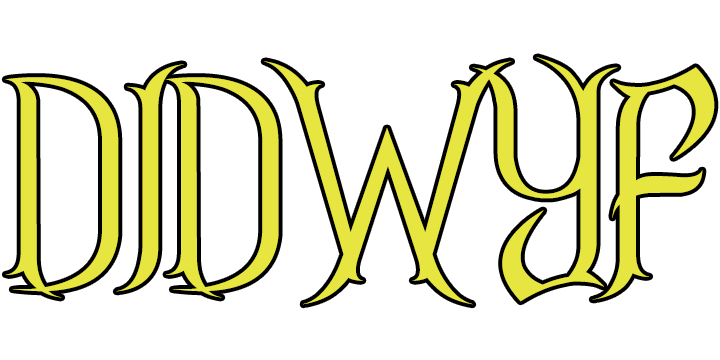
<style>
.page{position:relative;width:720px;height:360px;background:#ffffff}
.page>*{position:absolute;margin:0}
.t1{font:150px "Endor";color:#e7e53f}
</style>
<div class="page">
<p class="t1" style="left:5px;top:57px;width:710px;height:248px">DIDWYF</p>
</div>
